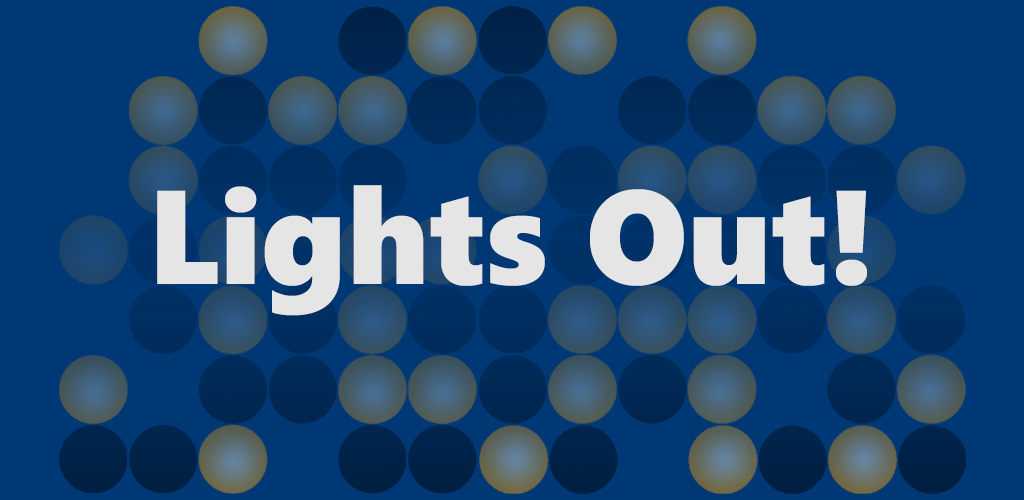
<style>
.page{position:relative;width:1024px;height:500px;background:#003875}
.page>*{position:absolute;margin:0}
.t1{font:133.3px "SegoeUIBlack";color:#e5e5e5}
</style>
<div class="page">
<p class="t1" style="left:157px;top:185px;width:710px;height:131px">Lights Out!</p>
</div>
